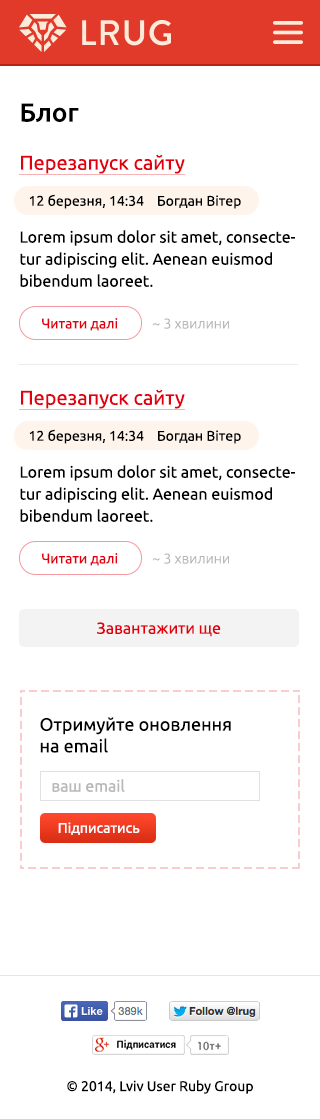
<style>
.page{position:relative;width:320px;height:1119px;background:#ffffff}
.page>*{position:absolute;margin:0}
.t1{font:26px "Ubuntu-Medium";color:#000000}
.t2{font:20px "Ubuntu";color:#e3000e}
.t3{font:14px "Ubuntu";color:#000000}
.t4{font:16px/22px "Ubuntu";color:#000000}
.t5{font:14px "Ubuntu";color:#e3000e}
.t6{font:14px "Ubuntu-Light";color:#b8b8b8}
.t7{font:16px "Ubuntu";color:#e3000e}
.t8{font:18px "Ubuntu";color:#000000}
.t9{font:16px "Ubuntu";color:#b8b8b8}
.t10{font:14px "Ubuntu";color:#ffffff}
</style>
<div class="page">
<p class="t1" style="left:21px;top:103px;width:58px;height:20px">Блог</p>
<p class="t2" style="left:21px;top:154px;width:164px;height:20px">Перезапуск сайту</p>
<p class="t3" style="left:29px;top:194px;width:212px;height:15px">12 березня, 14:34    Богдан Вітер</p>
<p class="t4" style="left:20px;top:230px;width:275px;height:57px">Lorem ipsum dolor sit amet, consectetur adipiscing elit. Aenean euismod bibendum laoreet.</p>
<p class="t5" style="left:42px;top:318px;width:76px;height:13px">Читати далі</p>
<p class="t6" style="left:153px;top:318px;width:76px;height:11px">~ 3 хвилини</p>
<p class="t2" style="left:21px;top:389px;width:164px;height:20px">Перезапуск сайту</p>
<p class="t3" style="left:29px;top:429px;width:212px;height:15px">12 березня, 14:34    Богдан Вітер</p>
<p class="t4" style="left:20px;top:465px;width:275px;height:57px">Lorem ipsum dolor sit amet, consectetur adipiscing elit. Aenean euismod bibendum laoreet.</p>
<p class="t5" style="left:42px;top:553px;width:76px;height:13px">Читати далі</p>
<p class="t6" style="left:153px;top:553px;width:76px;height:11px">~ 3 хвилини</p>
<p class="t7" style="left:96px;top:622px;width:125px;height:15px">Завантажити ще</p>
<p class="t8" style="left:40px;top:717px;width:191px;height:36px">Отримуйте оновлення <br>на email</p>
<p class="t9" style="left:52px;top:779px;width:73px;height:13px">ваш email</p>
<p class="t10" style="left:58px;top:822px;width:82px;height:13px">Підписатись</p>
<p class="t3" style="left:67px;top:1080px;width:186px;height:14px">© 2014, Lviv User Ruby Group</p>
</div>
